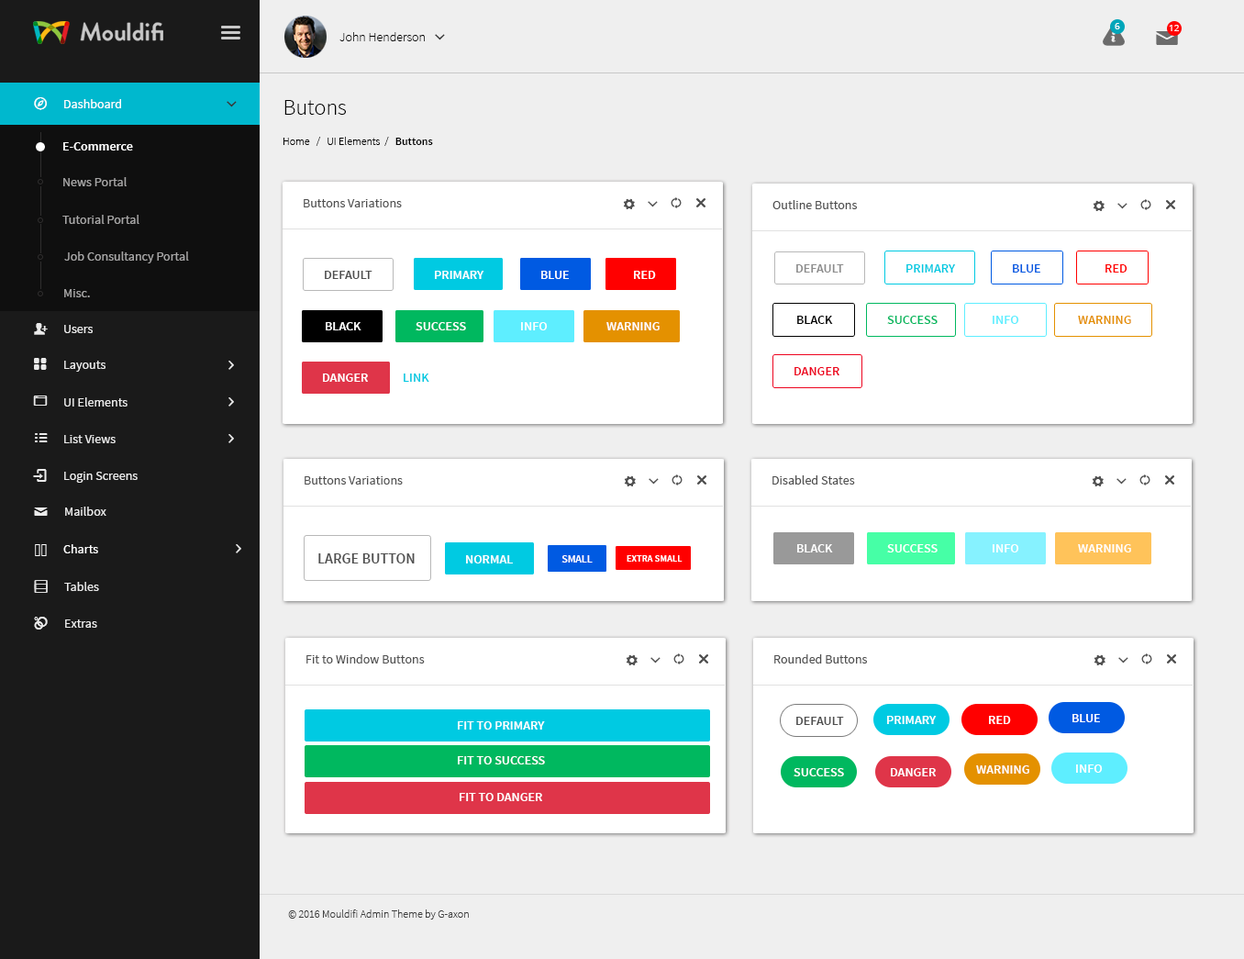
<style>
.page{position:relative;width:1244px;height:959px;background:#efefef}
.page>*{position:absolute;margin:0}
.t1{font:9.2px "OpenSans";color:#ffffff}
.t2{font:12.8px "SourceSansPro-Light";color:#000000}
.t3{font:12.8px "SourceSansPro-Regular";color:#ffffff}
.t4{font:12.8px "SourceSansPro-Regular";color:#ffffff;font-variant:small-caps}
.t5{font:22px "SourceSansPro-Light";color:#000000}
.t6{font:11px "SourceSansPro-Light";color:#000000}
.t7{font:11px "SourceSansPro-Semibold";color:#000000}
.t8{font:12.8px "SourceSansPro-Semibold";color:#ffffff}
.t9{font:12.8px "SourceSansPro-Regular";color:#a6a5a5}
.t10{font:12.8px "SourceSansPro-Regular";color:#505050}
.t11{font:12.5px "SourceSansPro-Regular";color:#a6a5a5}
.t12{font:12.8px "SourceSansPro-Semibold";color:#8e8e8e;text-transform:uppercase}
.t13{font:12.8px "SourceSansPro-Semibold";color:#00cae2;text-transform:uppercase}
.t14{font:12.8px "SourceSansPro-Semibold";color:#005ae2;text-transform:uppercase}
.t15{font:12.8px "SourceSansPro-Semibold";color:#ff0000;text-transform:uppercase}
.t16{font:12.8px "SourceSansPro-Semibold";color:#505050;text-transform:uppercase}
.t17{font:12.8px "SourceSansPro-Semibold";color:#ffffff;text-transform:uppercase}
.t18{font:12.8px "SourceSansPro-Semibold";color:#000000;text-transform:uppercase}
.t19{font:12.8px "SourceSansPro-Semibold";color:#00b85f;text-transform:uppercase}
.t20{font:12.8px "SourceSansPro-Semibold";color:#5eeeff;text-transform:uppercase}
.t21{font:12.8px "SourceSansPro-Semibold";color:#e49100;text-transform:uppercase}
.t22{font:12.8px "SourceSansPro-Regular";color:#ebebeb}
.t23{font:12.8px "SourceSansPro-Semibold";color:#ed041f;text-transform:uppercase}
.t24{font:14.7px "SourceSansPro-Semibold";color:#505050;text-transform:uppercase}
.t25{font:10.6px "SourceSansPro-Semibold";color:#ffffff;text-transform:uppercase}
.t26{font:9.5px "SourceSansPro-Semibold";color:#ffffff;text-transform:uppercase}
.t27{font:12.5px "SourceSansPro-Regular";color:#ebebeb}
.t28{font:11px "SourceSansPro-Light";color:#3e3e3e}
</style>
<div class="page">
<p class="t1" style="left:1115px;top:23px;width:5px;height:6px">6</p>
<p class="t1" style="left:1169px;top:25px;width:10px;height:6px">12</p>
<p class="t2" style="left:339px;top:32px;width:86px;height:9px">John Henderson</p>
<p class="t3" style="left:64px;top:99px;width:57px;height:9px"><span class="t4">D</span>ashboard</p>
<p class="t5" style="left:284px;top:100px;width:62px;height:15px">Butons</p>
<p class="t6" style="left:283px;top:137px;width:150px;height:9px">Home   /   UI Elements  /  <span class="t7"> Buttons</span></p>
<p class="t8" style="left:63px;top:142px;width:70px;height:8px">E-Commerce</p>
<p class="t9" style="left:63px;top:177px;width:64px;height:9px">News Portal</p>
<p class="t10" style="left:304px;top:199px;width:98px;height:8px">Buttons Variations</p>
<p class="t10" style="left:772px;top:200px;width:85px;height:9px">Outline Buttons</p>
<p class="t11" style="left:62px;top:215px;width:77px;height:9px">Tutorial Portal</p>
<p class="t11" style="left:64px;top:251px;width:125px;height:12px">Job Consultancy Portal</p>
<p class="t12" style="left:796px;top:264px;width:48px;height:8px">default</p>
<p class="t13" style="left:906px;top:264px;width:50px;height:8px">primary</p>
<p class="t14" style="left:1013px;top:264px;width:27px;height:8px">blue</p>
<p class="t15" style="left:1105px;top:264px;width:22px;height:8px">red</p>
<p class="t16" style="left:325px;top:271px;width:47px;height:8px">default</p>
<p class="t17" style="left:435px;top:271px;width:49px;height:8px">primary</p>
<p class="t17" style="left:541px;top:271px;width:28px;height:8px">blue</p>
<p class="t17" style="left:634px;top:271px;width:22px;height:8px">red</p>
<p class="t11" style="left:64px;top:289px;width:26px;height:8px">Misc.</p>
<p class="t18" style="left:797px;top:316px;width:36px;height:8px">black</p>
<p class="t19" style="left:887px;top:316px;width:51px;height:8px">SUCCESS</p>
<p class="t20" style="left:993px;top:316px;width:26px;height:8px">INFO</p>
<p class="t21" style="left:1078px;top:316px;width:53px;height:8px">WARNING</p>
<p class="t22" style="left:64px;top:325px;width:29px;height:8px">Users</p>
<p class="t17" style="left:326px;top:322px;width:35px;height:8px">black</p>
<p class="t17" style="left:416px;top:322px;width:50px;height:8px">SUCCESS</p>
<p class="t17" style="left:521px;top:322px;width:27px;height:8px">INFO</p>
<p class="t17" style="left:606px;top:322px;width:54px;height:8px">WARNING</p>
<p class="t22" style="left:64px;top:361px;width:41px;height:11px">Layouts</p>
<p class="t17" style="left:323px;top:373px;width:45px;height:9px">DANGER</p>
<p class="t13" style="left:404px;top:373px;width:25px;height:9px">LINK</p>
<p class="t23" style="left:794px;top:367px;width:45px;height:8px">DANGER</p>
<p class="t22" style="left:64px;top:397px;width:64px;height:9px">UI Elements</p>
<p class="t22" style="left:64px;top:435px;width:52px;height:8px">List Views</p>
<p class="t22" style="left:64px;top:472px;width:74px;height:11px">Login Screens</p>
<p class="t10" style="left:305px;top:476px;width:98px;height:8px">Buttons Variations</p>
<p class="t10" style="left:772px;top:475px;width:83px;height:9px">Disabled States</p>
<p class="t22" style="left:65px;top:506px;width:41px;height:10px">Mailbox</p>
<p class="t3" style="left:63px;top:544px;width:35px;height:9px">Charts</p>
<p class="t17" style="left:797px;top:544px;width:36px;height:8px">black</p>
<p class="t17" style="left:887px;top:544px;width:51px;height:8px">SUCCESS</p>
<p class="t17" style="left:993px;top:544px;width:26px;height:8px">INFO</p>
<p class="t17" style="left:1078px;top:544px;width:53px;height:8px">WARNING</p>
<p class="t24" style="left:318px;top:553px;width:97px;height:10px">large button</p>
<p class="t17" style="left:466px;top:555px;width:47px;height:8px">normal</p>
<p class="t25" style="left:561px;top:555px;width:32px;height:7px">small</p>
<p class="t26" style="left:627px;top:555px;width:55px;height:6px">extra small</p>
<p class="t27" style="left:64px;top:582px;width:35px;height:9px">Tables</p>
<p class="t27" style="left:65px;top:619px;width:32px;height:8px">Extras</p>
<p class="t10" style="left:306px;top:654px;width:119px;height:9px">Fit to Window Buttons</p>
<p class="t10" style="left:774px;top:654px;width:93px;height:9px">Rounded Buttons</p>
<p class="t17" style="left:1072px;top:714px;width:28px;height:8px">blue</p>
<p class="t17" style="left:458px;top:721px;width:87px;height:8px">fit to primary</p>
<p class="t16" style="left:796px;top:716px;width:48px;height:9px">default</p>
<p class="t17" style="left:887px;top:716px;width:50px;height:8px">primary</p>
<p class="t17" style="left:989px;top:716px;width:22px;height:8px">red</p>
<p class="t17" style="left:458px;top:756px;width:87px;height:8px">fit to success</p>
<p class="t17" style="left:793px;top:768px;width:51px;height:8px">success</p>
<p class="t17" style="left:891px;top:768px;width:45px;height:8px">danger</p>
<p class="t17" style="left:976px;top:765px;width:53px;height:8px">warning</p>
<p class="t17" style="left:1076px;top:764px;width:27px;height:8px">info</p>
<p class="t17" style="left:460px;top:793px;width:82px;height:8px">fit to danger</p>
<p class="t28" style="left:288px;top:909px;width:181px;height:10px">© 2016 Mouldifi Admin Theme by G-axon</p>
</div>
